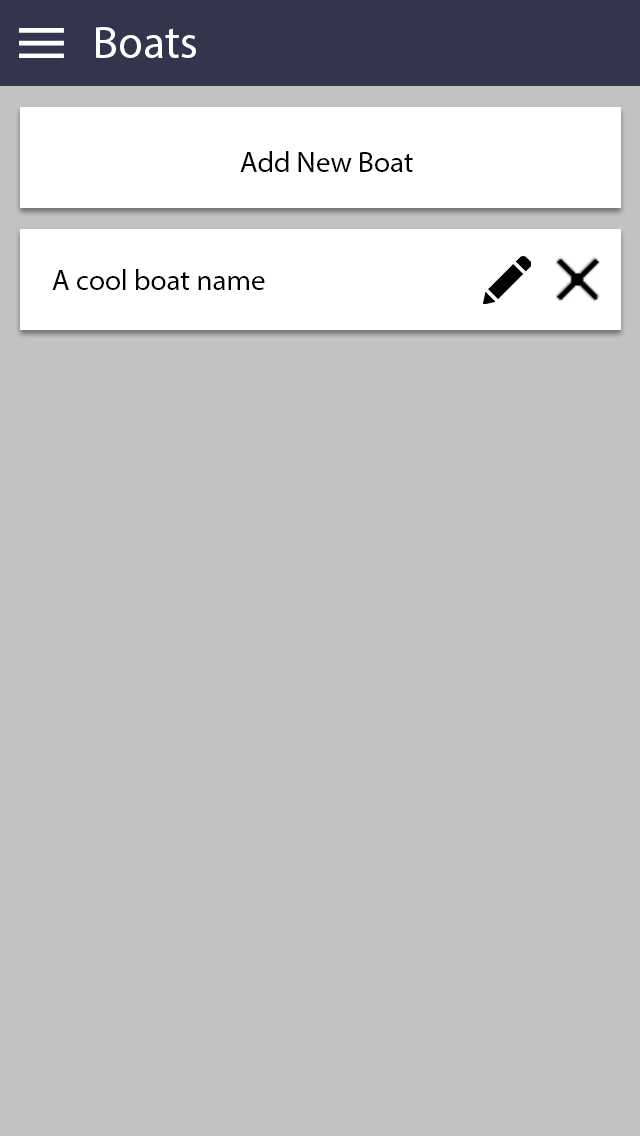
<style>
.page{position:relative;width:640px;height:1136px;background:#c2c2c2}
.page>*{position:absolute;margin:0}
.t1{font:45.8px "MyriadPro-Regular";color:#ffffff}
.t2{font:29.2px "MyriadPro-Regular";color:#000000}
</style>
<div class="page">
<p class="t1" style="left:96px;top:27px;width:100px;height:31px">Boats</p>
<p class="t2" style="left:240px;top:151px;width:173px;height:21px">Add New Boat</p>
<p class="t2" style="left:52px;top:269px;width:213px;height:21px">A cool boat name</p>
</div>
